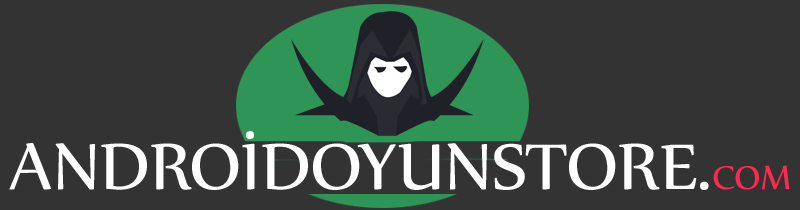
<style>
.page{position:relative;width:800px;height:210px;background:#333333}
.page>*{position:absolute;margin:0}
.t1{font:78.2px "Nyala-Regular";color:#ffffff}
.t2{font:39.8px "Nyala-Regular";color:#ff2851}
</style>
<div class="page">
<p class="t1" style="left:9px;top:131px;width:781px;height:59px">ANDROİDOYUNSTORE.<span class="t2">COM</span></p>
</div>
